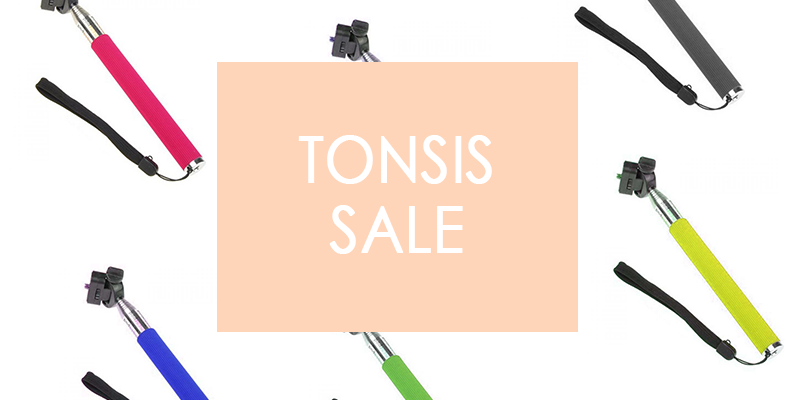
<style>
.page{position:relative;width:800px;height:400px;background:#ffffff}
.page>*{position:absolute;margin:0}
.t1{font:63.6px "CenturyGothic";color:#ffffff;font-weight:bold;scale:0.91 1}
</style>
<div class="page">
<p class="t1" style="left:298px;top:135px;width:194px;height:119px;text-align:center">TONSIS<br>SALE</p>
</div>
